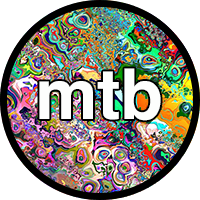
<style>
.page{position:relative;width:200px;height:200px;background:#ffffff}
.page>*{position:absolute;margin:0}
.t1{font:70px "Helvetica-Bold";color:#fdfefd}
</style>
<div class="page">
<p class="t1" style="left:39px;top:68px;width:122px;height:53px">mtb</p>
</div>
